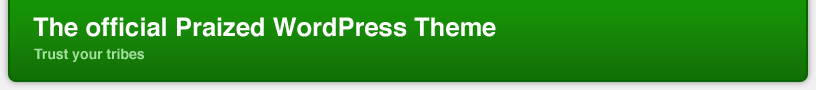
<style>
.page{position:relative;width:816px;height:90px}
.page>*{position:absolute;margin:0}
.t1{font:25.5px "Helvetica-Bold";color:#ffffff}
.t2{font:14px "Helvetica-Bold";color:#a4e09d}
</style>
<div class="page">
<p class="t1" style="left:33px;top:17px;width:463px;height:20px">The official Praized WordPress Theme</p>
<p class="t2" style="left:34px;top:48px;width:110px;height:14px">Trust your tribes</p>
</div>
